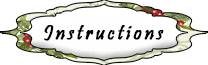
<style>
.page{position:relative;width:208px;height:65px;background:#ffffff}
.page>*{position:absolute;margin:0}
.t1{font:22px "Pristina-Regular";letter-spacing:0.125em;color:#000000;font-weight:bold}
</style>
<div class="page">
<p class="t1" style="left:44px;top:25px;width:120px;height:16px">Instructions</p>
</div>
